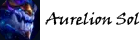
<style>
.page{position:relative;width:140px;height:40px;background:#ffffff}
.page>*{position:absolute;margin:0}
.t1{font:12px "VinerHandITC";color:#000000}
</style>
<div class="page">
<p class="t1" style="left:45px;top:12px;width:95px;height:14px">Aurelion Sol</p>
</div>
